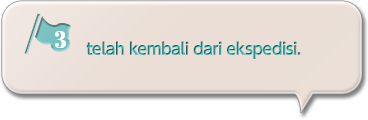
<style>
.page{position:relative;width:368px;height:120px;background:#eaded6}
.page>*{position:absolute;margin:0}
.t1{font:16px "UDShinGoPro-DeBold";letter-spacing:-0.04em}
</style>
<div class="page">
<p class="t1" style="left:86px;top:41px;width:215px;height:18px">telah kembali dari ekspedisi.</p>
</div>
